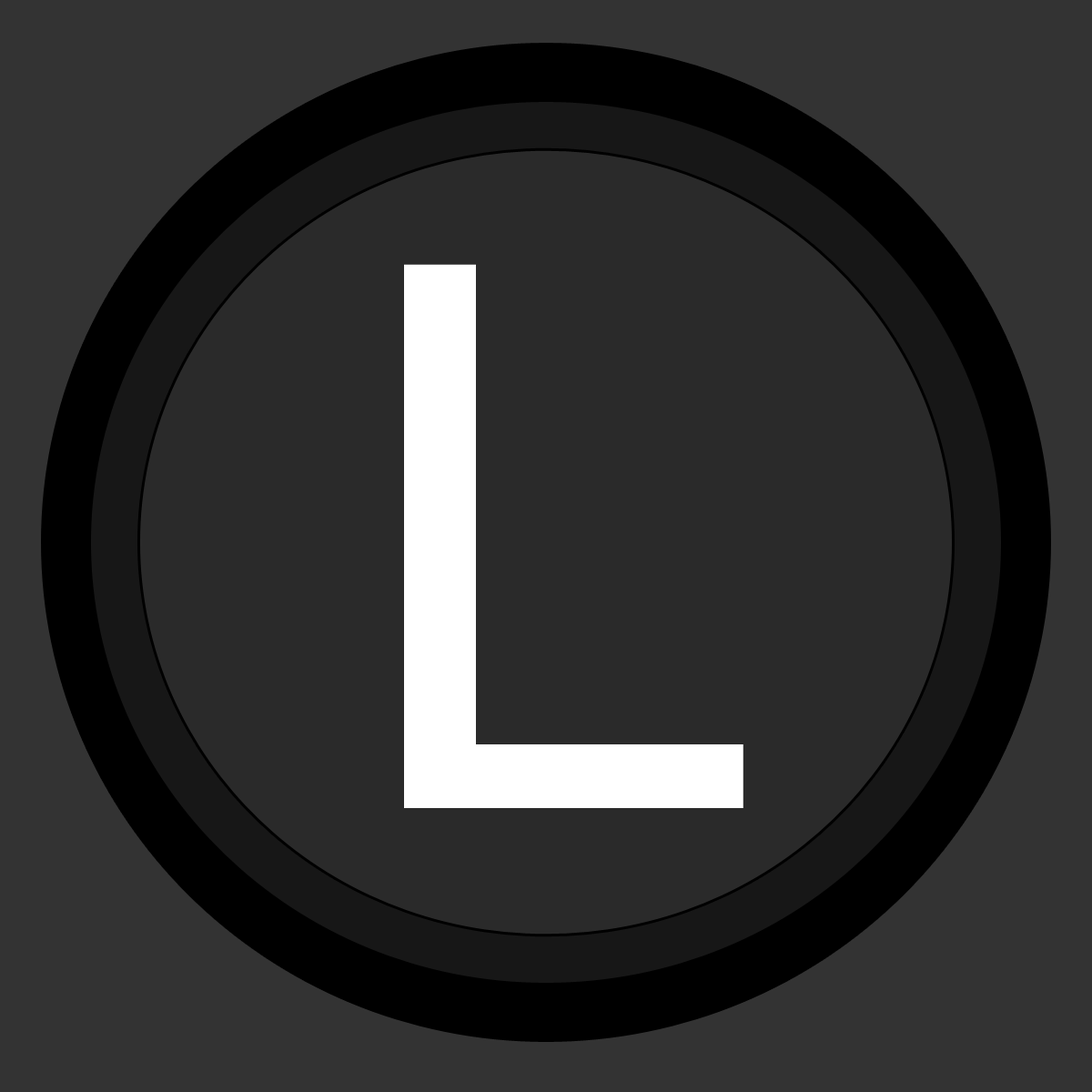
<style>
.page{position:relative;width:1092px;height:1092px;background:#2a2a2a}
.page>*{position:absolute;margin:0}
.t1{font:758.3px "ArialMT";color:#ffffff}
</style>
<div class="page">
<p class="t1" style="left:404px;top:264px;width:339px;height:544px">L</p>
</div>
